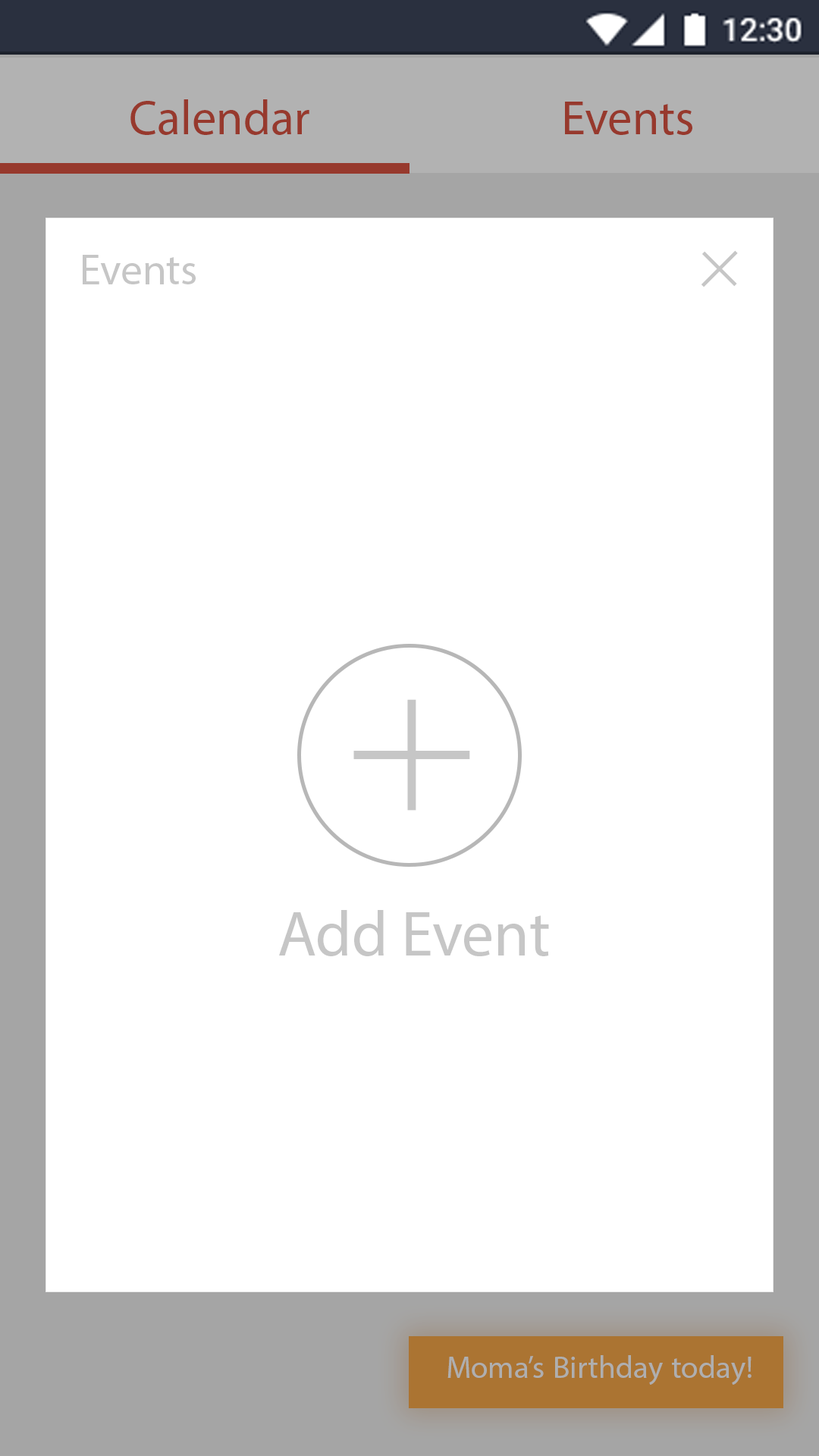
<style>
.page{position:relative;width:819px;height:1456px;background:#ffffff}
.page>*{position:absolute;margin:0}
.t1{font:68.2px "MyriadArabic-Regular";color:#97392d}
.t2{font:60.7px "MyriadArabic-Regular";color:#c6c6c6}
.t3{font:111.5px "BaskOldFace";color:#c6c6c6}
.t4{font:271.5px "BaskOldFace";color:#c6c6c6}
.t5{font:63.7px "MyriadPro-Regular";color:#c6c6c6}
.t6{font:43.8px "MyriadArabic-Regular";color:#afafaf}
</style>
<div class="page">
<p class="t1" style="left:130px;top:99px;width:179px;height:36px">Calendar</p>
<p class="t1" style="left:565px;top:102px;width:127px;height:33px">Events</p>
<p class="t2" style="left:83px;top:255px;width:113px;height:29px">Events</p>
<p class="t3" style="left:701px;top:250px;width:37px;height:37px;rotate:-45deg">+</p>
<p class="t4" style="left:353px;top:699px;width:117px;height:112px">+</p>
<p class="t5" style="left:279px;top:910px;width:270px;height:46px">Add Event</p>
<p class="t6" style="left:447px;top:1355px;width:304px;height:30px">Moma’s Birthday today!</p>
</div>
